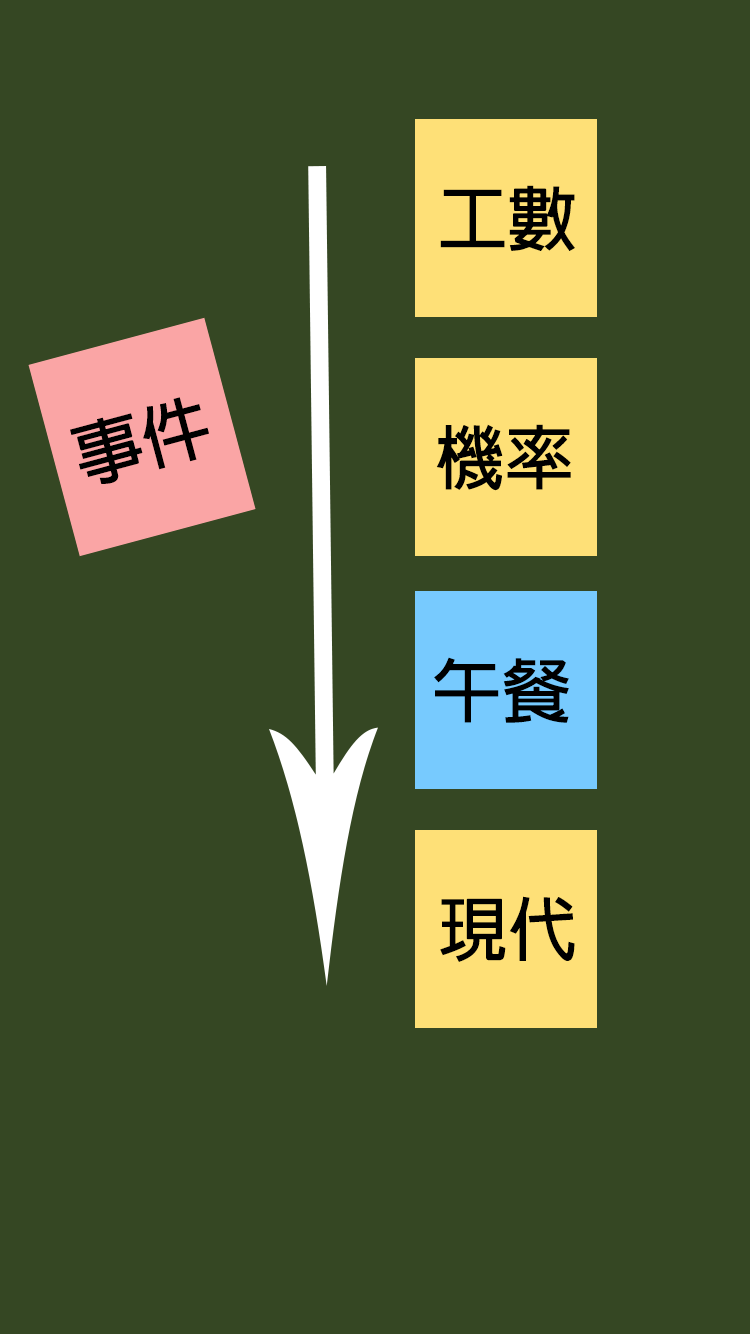
<style>
.page{position:relative;width:750px;height:1334px;background:#354723}
.page>*{position:absolute;margin:0}
.t1{font:69.6px "AdobeFanHeitiStd-Bold";color:#000000}
</style>
<div class="page">
<p class="t1" style="left:440px;top:185px;width:135px;height:66px">工數</p>
<p class="t1" style="left:70px;top:397px;width:139px;height:87px;rotate:-15deg">事件</p>
<p class="t1" style="left:436px;top:424px;width:135px;height:67px">機率</p>
<p class="t1" style="left:434px;top:657px;width:135px;height:66px">午餐</p>
<p class="t1" style="left:440px;top:896px;width:135px;height:66px">現代</p>
</div>
